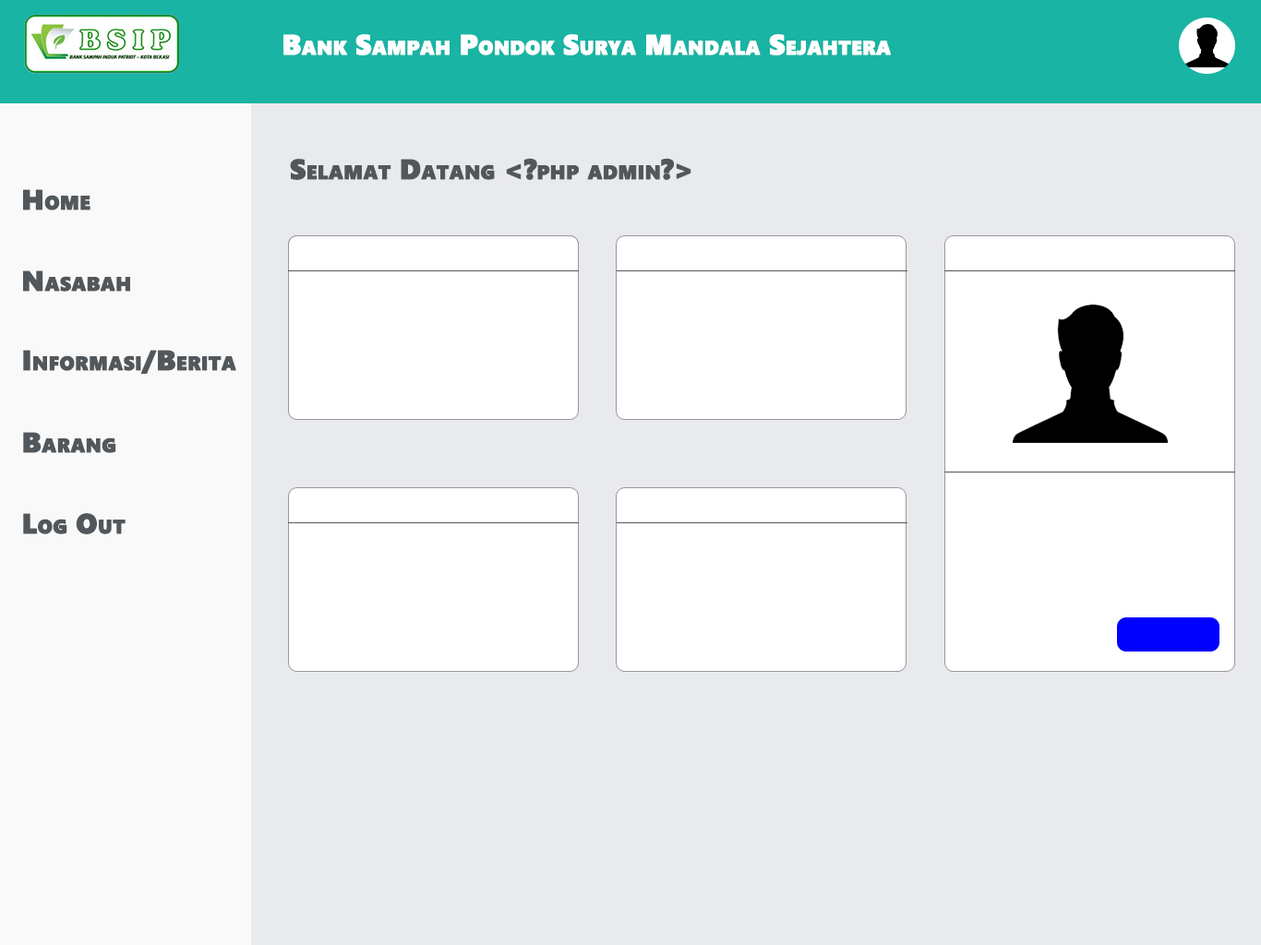
<style>
.page{position:relative;width:1261px;height:945px;background:#e9eaee}
.page>*{position:absolute;margin:0}
.t1{font:27.7px "SegoeUIBlack";color:#ffffff;font-variant:small-caps;font-weight:bold}
.t2{font:27.7px "SegoeUIBlack";color:#52575b;font-variant:small-caps;font-weight:bold}
</style>
<div class="page">
<p class="t1" style="left:283px;top:34px;width:608px;height:21px">Bank Sampah Pondok Surya Mandala Sejahtera</p>
<p class="t2" style="left:290px;top:158px;width:402px;height:22px">Selamat Datang &lt;?php admin?&gt;</p>
<p class="t2" style="left:23px;top:189px;width:67px;height:22px">Home</p>
<p class="t2" style="left:23px;top:271px;width:107px;height:21px">Nasabah</p>
<p class="t2" style="left:23px;top:350px;width:213px;height:24px">Informasi/Berita</p>
<p class="t2" style="left:23px;top:432px;width:93px;height:21px">Barang</p>
<p class="t2" style="left:23px;top:513px;width:103px;height:22px">Log Out</p>
</div>
